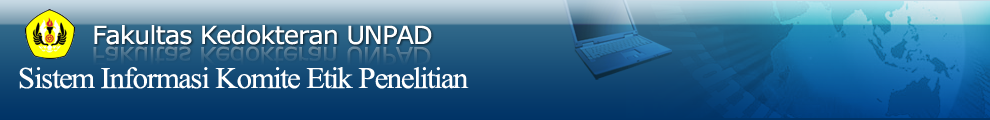
<style>
.page{position:relative;width:990px;height:120px}
.page>*{position:absolute;margin:0}
.t1{font:25px "Verdana";letter-spacing:-0.04em;color:#ffffff}
.t2{font:25px "Verdana";letter-spacing:-0.04em}
.t3{font:30px "TimesNewRomanPSMT";letter-spacing:-0.04em;color:#ffffff}
</style>
<div class="page">
<p class="t1" style="left:94px;top:25px;width:338px;height:20px">Fakultas Kedokteran UNPAD</p>
<p class="t2" style="left:93px;top:46px;width:338px;height:20px">Fakultas Kedokteran UNPAD</p>
<p class="t3" style="left:19px;top:67px;width:450px;height:22px">Sistem Informasi Komite Etik Penelitian</p>
</div>
